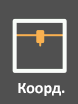
<style>
.page{position:relative;width:78px;height:104px;background:#505050}
.page>*{position:absolute;margin:0}
.t1{font:12px "Calibri-Bold";color:#ffffff}
</style>
<div class="page">
<p class="t1" style="left:18px;top:83px;width:47px;height:13px">Коорд.</p>
</div>
